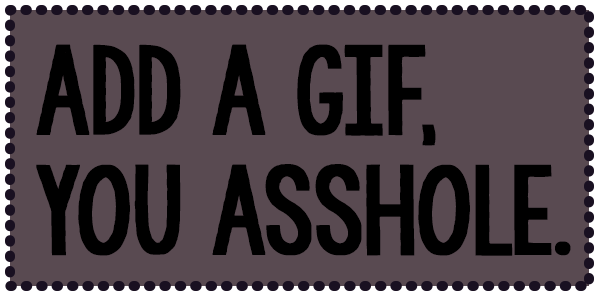
<style>
.page{position:relative;width:600px;height:300px;background:#594a51}
.page>*{position:absolute;margin:0}
.t1{font:100px "KGAllofMe";letter-spacing:-0.05em;color:#000000;text-transform:uppercase;font-weight:bold}
</style>
<div class="page">
<p class="t1" style="left:36px;top:44px;width:535px;height:212px">Add a gif, <br>you asshole.</p>
</div>
